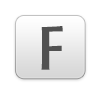
<style>
.page{position:relative;width:100px;height:100px;background:#ffffff}
.page>*{position:absolute;margin:0}
.t1{font:60px "LithosPro-Regular";color:#515151;font-weight:bold}
</style>
<div class="page">
<p class="t1" style="left:41px;top:26px;width:22px;height:44px">F</p>
</div>
